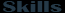
<style>
.page{position:relative;width:65px;height:13px;background:#000000}
.page>*{position:absolute;margin:0}
.t1{font:16px "BritannicBold";color:#253947;scale:1.56 1}
</style>
<div class="page">
<p class="t1" style="left:3px;top:1px;width:59px;height:11px">Skills</p>
</div>
